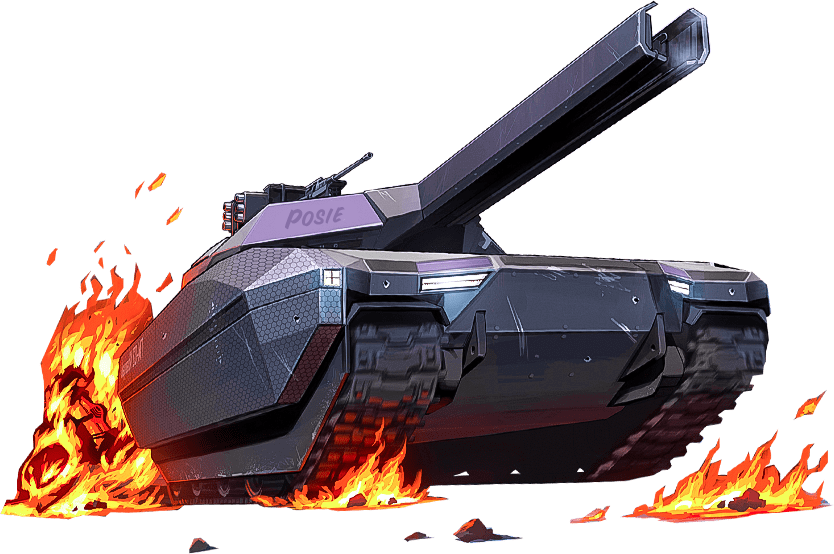
<style>
.page{position:relative;width:834px;height:554px;background:#ffffff}
.page>*{position:absolute;margin:0}
.t1{font:24px "Snyder-Regular";letter-spacing:0.025em;color:#8770a7}
</style>
<div class="page">
<p class="t1" style="left:285px;top:207px;width:60px;height:23px;rotate:-8deg">Posie</p>
</div>
